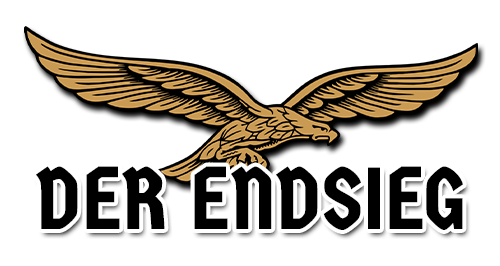
<style>
.page{position:relative;width:500px;height:266px;background:#ffffff}
.page>*{position:absolute;margin:0}
.t1{font:87.6px "GermaniaOne-Regular";color:#000000}
</style>
<div class="page">
<p class="t1" style="left:36px;top:166px;width:427px;height:64px">DER ENDSIEG</p>
</div>
